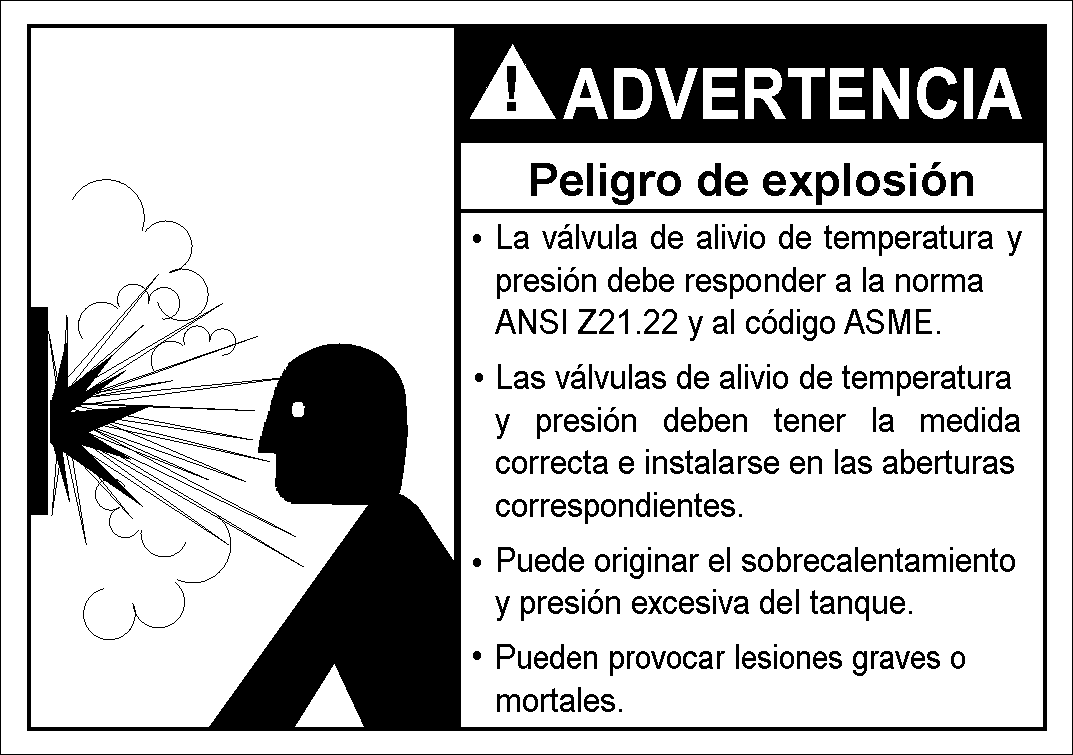
<style>
.page{position:relative;width:1073px;height:755px;background:#ffffff}
.page>*{position:absolute;margin:0}
.t1{font:70.8px "Arial-BoldMT";color:#ffffff;scale:0.9 1}
.t2{font:45.8px "Arial-BoldMT";color:#010101}
.t3{font:35.4px "ArialMT";color:#010101;scale:0.9 1}
</style>
<div class="page">
<p class="t1" style="left:563px;top:67px;width:459px;height:52px">ADVERTENCIA</p>
<p class="t2" style="left:531px;top:162px;width:442px;height:43px">Peligro de explosión</p>
<p class="t3" style="left:495px;top:224px;width:527px;height:488px;text-align:justify">La válvula de alivio de temperatura y presión debe responder a la norma  ANSI Z21.22 y al código ASME.<br>Las válvulas de alivio de temperatura  y presión deben tener la medida correcta e instalarse en las aberturas  correspondientes.<br>Puede originar el sobrecalentamiento  y presión excesiva del tanque.<br>Pueden provocar lesiones graves o   mortales.</p>
<p class="t3" style="left:473px;top:234px;width:8px;height:9px">•</p>
<p class="t3" style="left:475px;top:373px;width:8px;height:9px">•</p>
<p class="t3" style="left:473px;top:558px;width:8px;height:9px">•</p>
<p class="t3" style="left:473px;top:651px;width:8px;height:9px">•</p>
</div>
